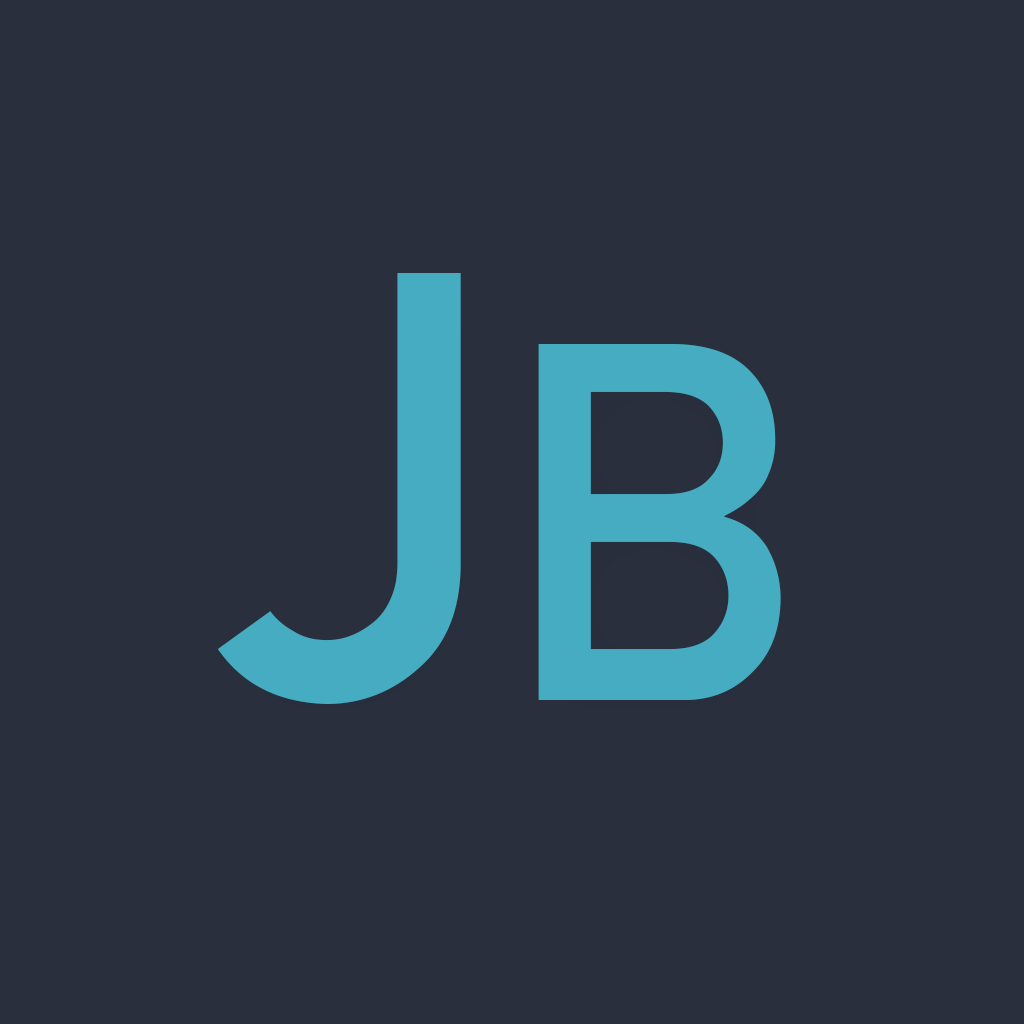
<style>
.page{position:relative;width:1024px;height:1024px;background:#292f3d}
.page>*{position:absolute;margin:0}
.t1{font:600px "DINAlternate-Bold";letter-spacing:-0.01em;color:#46acc2}
.t2{font:500px "DINAlternate-Bold";letter-spacing:-0.01em;color:#46acc2}
</style>
<div class="page">
<p class="t1" style="left:217px;top:273px;width:564px;height:431px">J<span class="t2">B</span></p>
</div>
